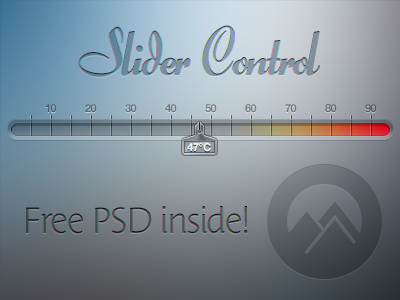
<style>
.page{position:relative;width:400px;height:300px}
.page>*{position:absolute;margin:0}
.t1{font:11px "HelveticaNeue-Bold";letter-spacing:-0.04em;color:#475f6d}
.t2{font:11px "HelveticaNeue-Bold";letter-spacing:-0.04em;color:#556975}
.t3{font:11px "HelveticaNeue-Bold";letter-spacing:-0.04em;color:#63737c}
.t4{font:11px "HelveticaNeue-Bold";letter-spacing:-0.04em;color:#6f7a82}
.t5{font:11px "HelveticaNeue-Bold";letter-spacing:-0.04em;color:#777f85}
.t6{font:11px "HelveticaNeue-Bold";letter-spacing:-0.04em;color:#797f83}
.t7{font:11px "HelveticaNeue-Bold";letter-spacing:-0.04em;color:#74797c}
.t8{font:11px "HelveticaNeue-Bold";letter-spacing:-0.04em;color:#696d71}
.t9{font:11px "HelveticaNeue-Bold";letter-spacing:-0.04em;color:#595b60}
.t10{font:11px "HelveticaNeue-Bold";letter-spacing:-0.04em}
.t11{font:11px "HelveticaNeue-Bold";letter-spacing:-0.04em;color:#ffffff}
.t12{font:11px "HelveticaNeue-Bold";letter-spacing:-0.04em;color:#ffffed}
</style>
<div class="page">
<p class="t1" style="left:45px;top:104px;width:12px;height:9px">10</p>
<p class="t2" style="left:85px;top:104px;width:12px;height:9px">20</p>
<p class="t3" style="left:125px;top:104px;width:12px;height:9px">30</p>
<p class="t4" style="left:165px;top:104px;width:12px;height:9px">40</p>
<p class="t5" style="left:205px;top:104px;width:12px;height:9px">50</p>
<p class="t6" style="left:245px;top:104px;width:12px;height:9px">60</p>
<p class="t7" style="left:285px;top:104px;width:12px;height:9px">70</p>
<p class="t8" style="left:325px;top:104px;width:12px;height:9px">80</p>
<p class="t9" style="left:365px;top:104px;width:12px;height:9px">90</p>
<p class="t10" style="left:187px;top:143px;width:24px;height:9px">47℃</p>
<p class="t11" style="left:187px;top:143px;width:24px;height:9px">47℃</p>
<p class="t12" style="left:187px;top:143px;width:24px;height:9px">47℃</p>
</div>
